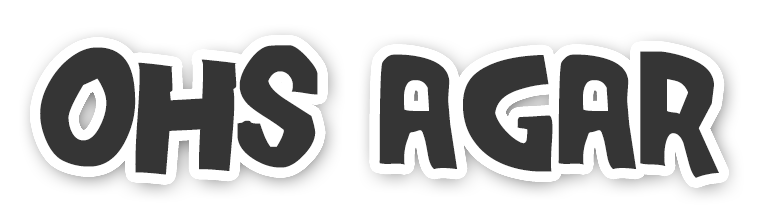
<style>
.page{position:relative;width:761px;height:223px;background:#ffffff}
.page>*{position:absolute;margin:0}
.t1{font:150px "SeriesOrbit";color:#353535}
</style>
<div class="page">
<p class="t1" style="left:40px;top:45px;width:679px;height:133px">OHS Agar</p>
</div>
